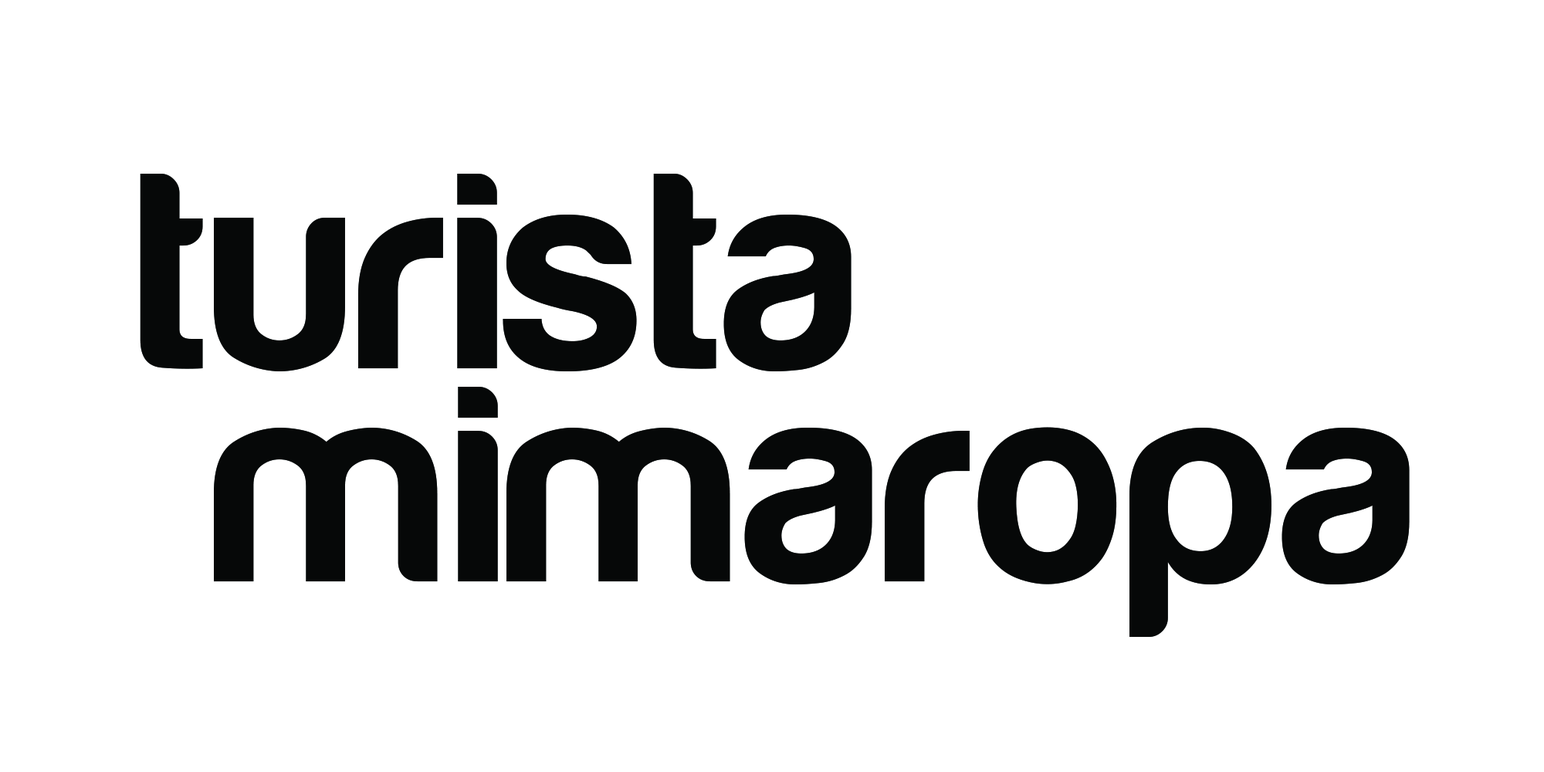
<style>
.page{position:relative;width:1544px;height:772px;background:#ffffff}
.page>*{position:absolute;margin:0}
.t1{font:289.6px "Harabara";letter-spacing:0.025em;color:#060808}
</style>
<div class="page">
<p class="t1" style="left:140px;top:174px;width:712px;height:197px">turista</p>
<p class="t1" style="left:214px;top:387px;width:1196px;height:250px">mimaropa</p>
</div>
